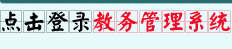
<style>
.page{position:relative;width:232px;height:49px;background:#e8f9fb}
.page>*{position:absolute;margin:0}
.t1{font:22px "YankaigungEG-Ultra-GB";letter-spacing:0.05em;color:#020202}
.t2{font:22px "YankaigungEG-Ultra-GB";letter-spacing:0.05em;color:#f20924}
</style>
<div class="page">
<p class="t1" style="left:0px;top:10px;width:92px;height:23px">点击登录</p>
<p class="t2" style="left:93px;top:10px;width:138px;height:23px">教务管理系统</p>
</div>
